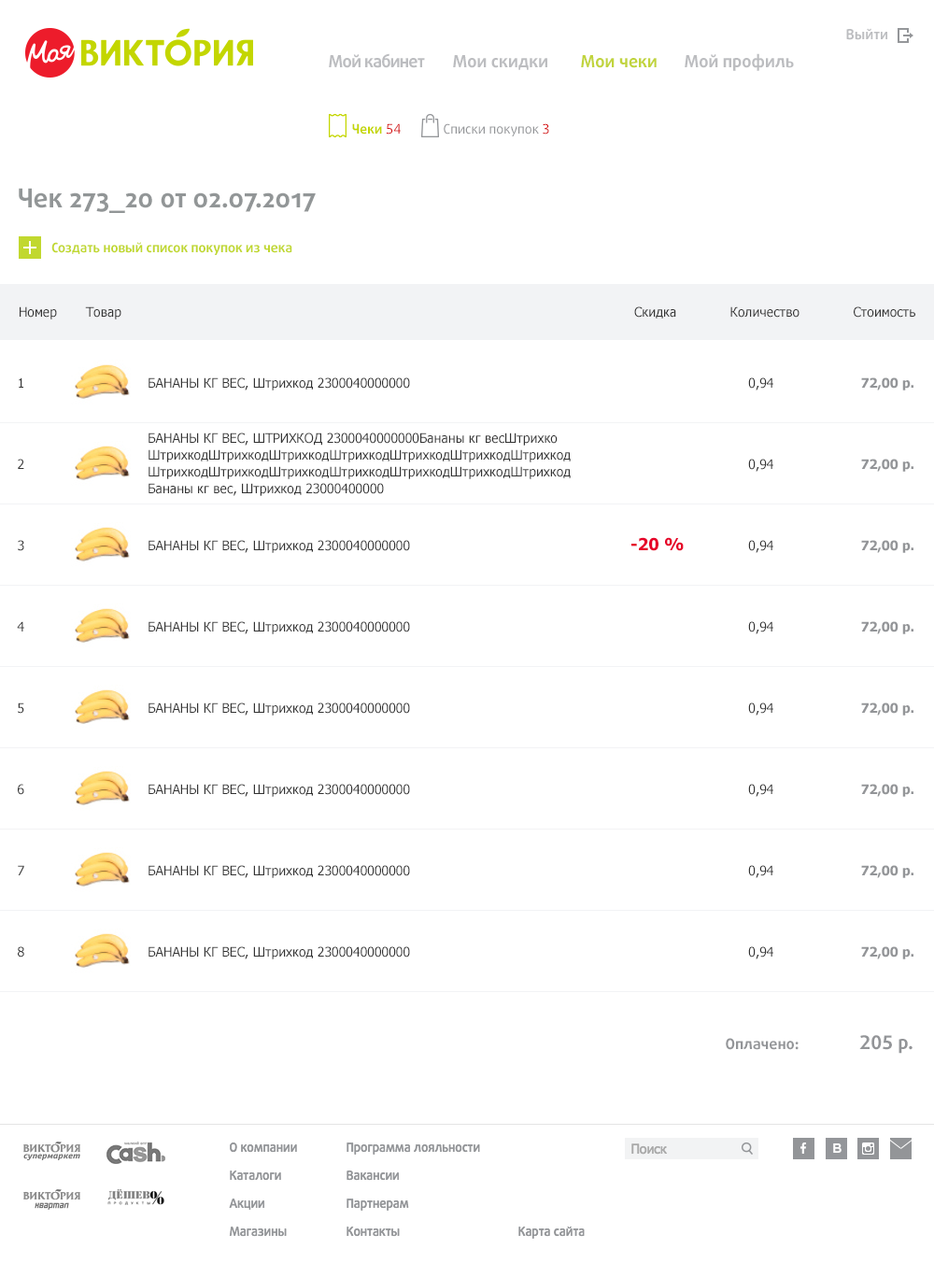
<style>
.page{position:relative;width:934px;height:1277px;background:#ffffff}
.page>*{position:absolute;margin:0}
.t1{font:14px "DaxlineOffcPro-Bold";color:#bcbdc0}
.t2{font:16.8px "DaxlineOffcPro-Bold";letter-spacing:-0.04em;color:#bcbdc0}
.t3{font:16.8px "DaxlineOffcPro-Bold";color:#bcbdc0}
.t4{font:16.8px "DaxlineOffcPro-Bold";color:#c1d43c}
.t5{font:13.1px "DaxlineOffcPro-Bold";color:#c4d600}
.t6{font:13.1px "DaxlineOffcPro";color:#d6090b}
.t7{font:13.1px "DaxlineOffcPro";color:#939598}
.t8{font:26.2px "DaxlinePro-Bold";color:#929697}
.t9{font:13.1px "DaxlinePro-Bold";color:#c1d82f}
.t10{font:13.1px "Tahoma";color:#333333}
.t11{font:13.1px "Tahoma";color:#333333;text-transform:uppercase}
.t12{font:13.1px "Tahoma-Bold";color:#939598}
.t13{font:13.1px/16.8px "Tahoma";color:#333333}
.t14{font:13.1px/16.8px "Tahoma";color:#333333;text-transform:uppercase}
.t15{font:16.8px "Tahoma-Bold";color:#e60028}
.t16{font:13.1px "Tahoma"}
.t17{font:14.9px "DaxlinePro-Bold";color:#939598}
.t18{font:18.7px "DaxlineOffcPro-Bold";color:#939598}
</style>
<div class="page">
<p class="t1" style="left:846px;top:28px;width:41px;height:12px">Выйти</p>
<p class="t2" style="left:329px;top:53px;width:96px;height:15px">Мой кабинет</p>
<p class="t3" style="left:685px;top:53px;width:109px;height:18px">Мой профиль</p>
<p class="t3" style="left:453px;top:55px;width:94px;height:15px">Мои скидки</p>
<p class="t4" style="left:581px;top:55px;width:76px;height:13px">Мои чеки</p>
<p class="t5" style="left:352px;top:123px;width:49px;height:11px">Чеки <span class="t6">54</span></p>
<p class="t7" style="left:444px;top:123px;width:105px;height:13px">Списки покупок <span class="t6">3</span></p>
<p class="t8" style="left:19px;top:188px;width:297px;height:25px">Чек 273_20 от 02.07.2017</p>
<p class="t9" style="left:51px;top:242px;width:241px;height:13px">Создать новый список покупок из чека</p>
<p class="t10" style="left:20px;top:306px;width:37px;height:13px">Номер</p>
<p class="t10" style="left:85px;top:306px;width:36px;height:13px">Товар</p>
<p class="t10" style="left:634px;top:306px;width:42px;height:12px">Скидка</p>
<p class="t10" style="left:730px;top:306px;width:69px;height:12px">Количество</p>
<p class="t10" style="left:854px;top:306px;width:61px;height:12px">Стоимость</p>
<p class="t10" style="left:19px;top:377px;width:4px;height:11px">1</p>
<p class="t10" style="left:149px;top:377px;width:261px;height:13px"><span class="t11">Бананы кг вес, </span>Штрихкод 2300040000000</p>
<p class="t10" style="left:748px;top:377px;width:25px;height:13px">0,94</p>
<p class="t12" style="left:861px;top:377px;width:52px;height:13px">72,00 р.</p>
<p class="t13" style="left:149px;top:432px;width:422px;height:64px"><span class="t14">Бананы кг вес, Штрихкод </span>2300040000000Бананы кг весШтрихко<br>ШтрихкодШтрихкодШтрихкодШтрихкодШтрихкодШтрихкодШтрихкод<br>ШтрихкодШтрихкодШтрихкодШтрихкодШтрихкодШтрихкодШтрихкод<br>Бананы кг вес, Штрихкод 23000400000</p>
<p class="t10" style="left:18px;top:459px;width:6px;height:10px">2</p>
<p class="t10" style="left:748px;top:459px;width:25px;height:13px">0,94</p>
<p class="t12" style="left:861px;top:459px;width:52px;height:13px">72,00 р.</p>
<p class="t10" style="left:18px;top:540px;width:6px;height:11px">3</p>
<p class="t10" style="left:149px;top:540px;width:261px;height:13px"><span class="t11">Бананы кг вес, </span>Штрихкод 2300040000000</p>
<p class="t15" style="left:631px;top:537px;width:53px;height:14px">-20 %</p>
<p class="t10" style="left:748px;top:540px;width:25px;height:13px">0,94</p>
<p class="t12" style="left:861px;top:540px;width:52px;height:13px">72,00 р.</p>
<p class="t10" style="left:17px;top:621px;width:7px;height:10px">4</p>
<p class="t10" style="left:149px;top:621px;width:261px;height:13px"><span class="t11">Бананы кг вес, </span>Штрихкод 2300040000000</p>
<p class="t10" style="left:748px;top:621px;width:25px;height:13px">0,94</p>
<p class="t12" style="left:861px;top:621px;width:52px;height:13px">72,00 р.</p>
<p class="t10" style="left:18px;top:702px;width:6px;height:12px">5</p>
<p class="t10" style="left:149px;top:702px;width:261px;height:13px"><span class="t11">Бананы кг вес, </span>Штрихкод 2300040000000</p>
<p class="t10" style="left:748px;top:702px;width:25px;height:13px">0,94</p>
<p class="t12" style="left:861px;top:702px;width:52px;height:13px">72,00 р.</p>
<p class="t10" style="left:18px;top:784px;width:6px;height:11px">6</p>
<p class="t10" style="left:149px;top:784px;width:261px;height:13px"><span class="t11">Бананы кг вес, </span>Штрихкод 2300040000000</p>
<p class="t10" style="left:748px;top:784px;width:25px;height:13px">0,94</p>
<p class="t12" style="left:861px;top:784px;width:52px;height:13px">72,00 р.</p>
<p class="t16" style="left:18px;top:865px;width:6px;height:10px">7</p>
<p class="t10" style="left:149px;top:865px;width:261px;height:13px"><span class="t11">Бананы кг вес, </span>Штрихкод 2300040000000</p>
<p class="t10" style="left:748px;top:865px;width:25px;height:13px">0,94</p>
<p class="t12" style="left:861px;top:865px;width:52px;height:13px">72,00 р.</p>
<p class="t10" style="left:18px;top:946px;width:6px;height:11px">8</p>
<p class="t10" style="left:149px;top:946px;width:261px;height:13px"><span class="t11">Бананы кг вес, </span>Штрихкод 2300040000000</p>
<p class="t10" style="left:748px;top:946px;width:25px;height:13px">0,94</p>
<p class="t12" style="left:861px;top:946px;width:52px;height:13px">72,00 р.</p>
<p class="t17" style="left:726px;top:1038px;width:73px;height:12px">Оплачено:</p>
<p class="t18" style="left:859px;top:1035px;width:53px;height:19px">205 р.</p>
</div>
